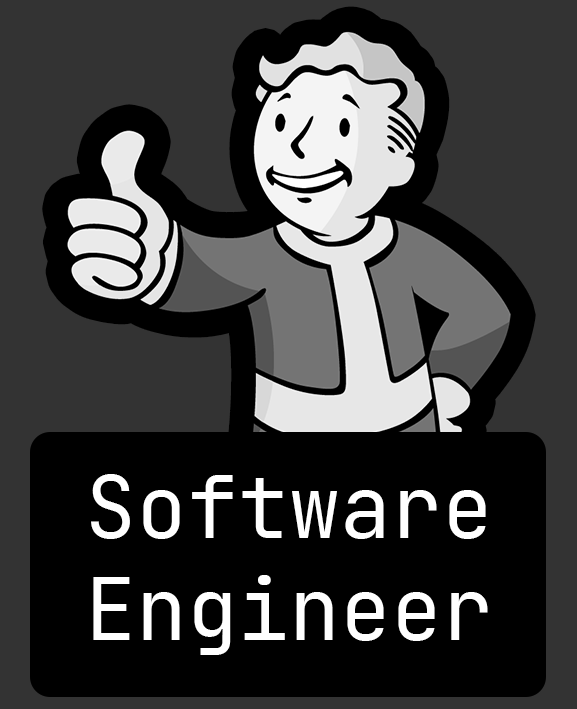
<style>
.page{position:relative;width:577px;height:709px;background:#000000}
.page>*{position:absolute;margin:0}
.t1{font:85px "JetBrainsMono-Regular";color:#ffffff}
</style>
<div class="page">
<p class="t1" style="left:91px;top:474px;width:397px;height:181px;text-align:center">Software<br>Engineer</p>
</div>
